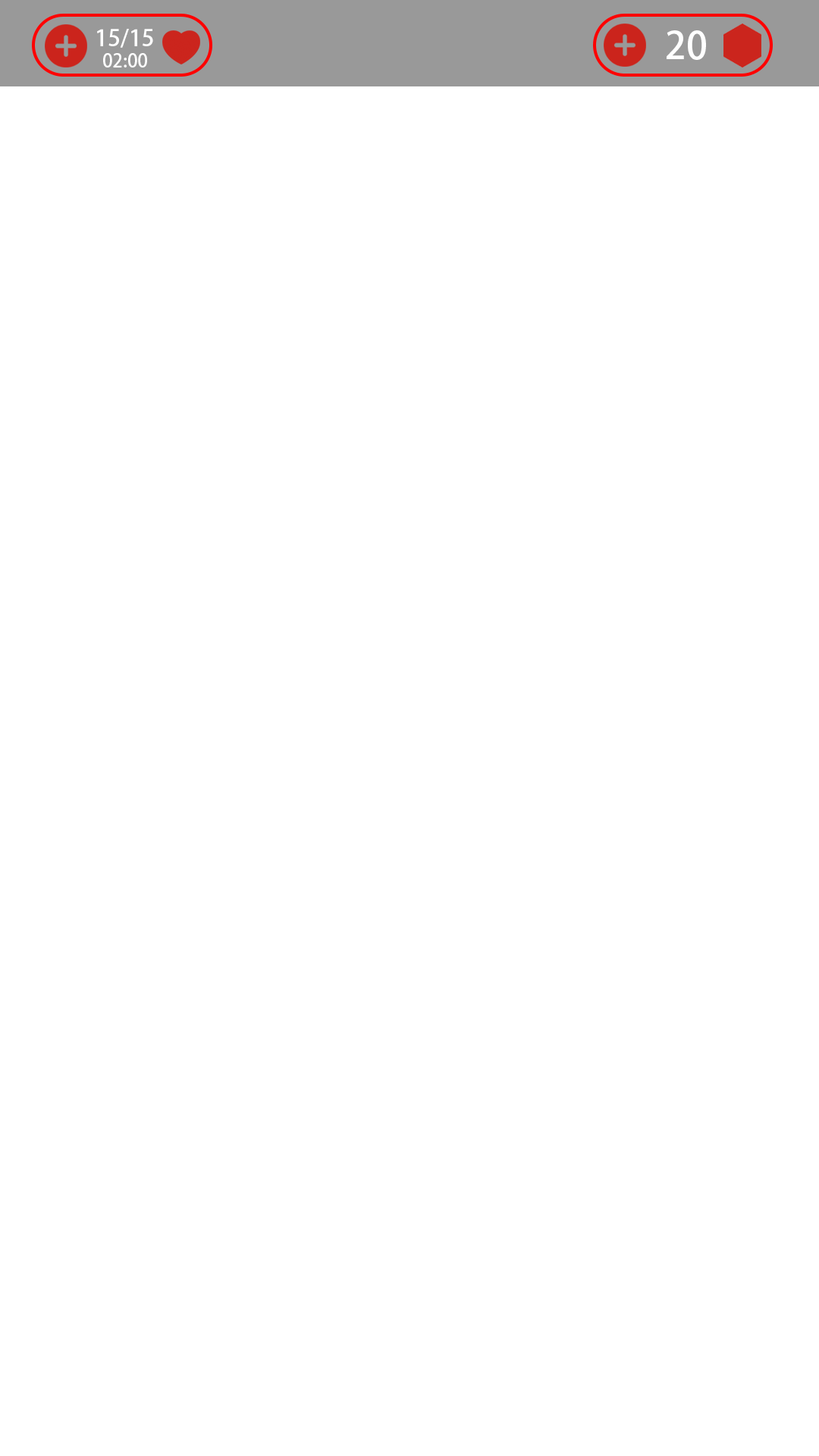
<style>
.page{position:relative;width:819px;height:1456px;background:#ffffff}
.page>*{position:absolute;margin:0}
.t1{font:22.7px "AdobeHeitiStd-Regular";color:#ffffff}
.t2{font:37.9px "AdobeHeitiStd-Regular";color:#ffffff}
.t3{font:18.2px "AdobeHeitiStd-Regular";color:#ffffff}
</style>
<div class="page">
<p class="t1" style="left:97px;top:29px;width:56px;height:19px">15/15</p>
<p class="t2" style="left:667px;top:30px;width:39px;height:30px">20</p>
<p class="t3" style="left:103px;top:53px;width:44px;height:14px">02:00</p>
</div>
